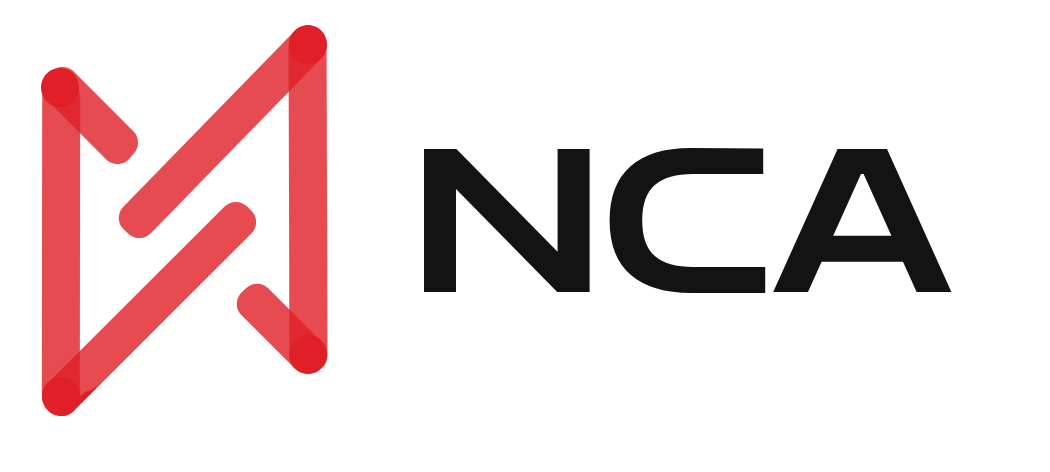
<style>
.page{position:relative;width:1050px;height:472px;background:#ffffff}
.page>*{position:absolute;margin:0}
.t1{font:200px "ZenDots-Regular";color:#131313}
</style>
<div class="page">
<p class="t1" style="left:424px;top:147px;width:528px;height:146px">NCA</p>
</div>
